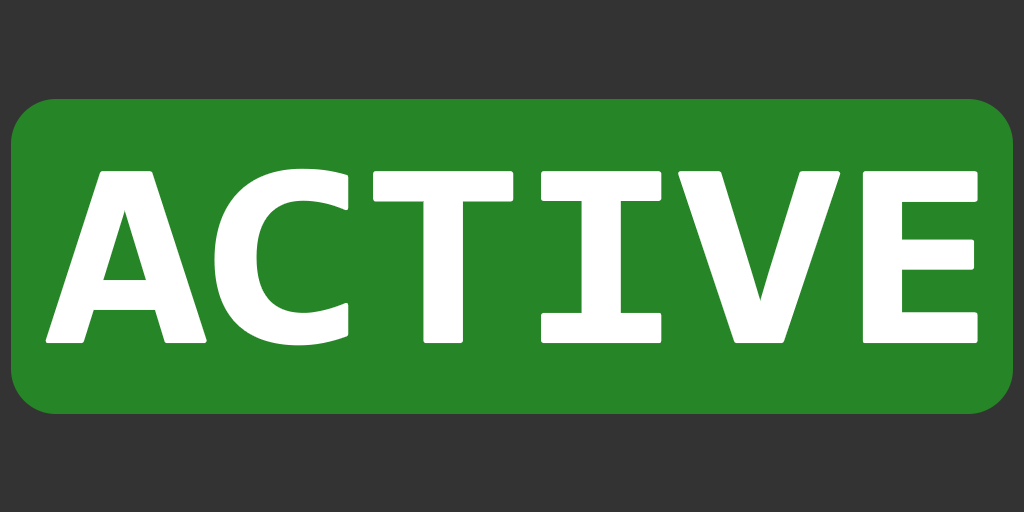
<style>
.page{position:relative;width:1024px;height:512px;background:#268526}
.page>*{position:absolute;margin:0}
.t1{font:262.6px "Consolas-Bold";color:#ffffff;scale:1.1 1}
</style>
<div class="page">
<p class="t1" style="left:47px;top:170px;width:929px;height:174px">ACTIVE</p>
</div>
